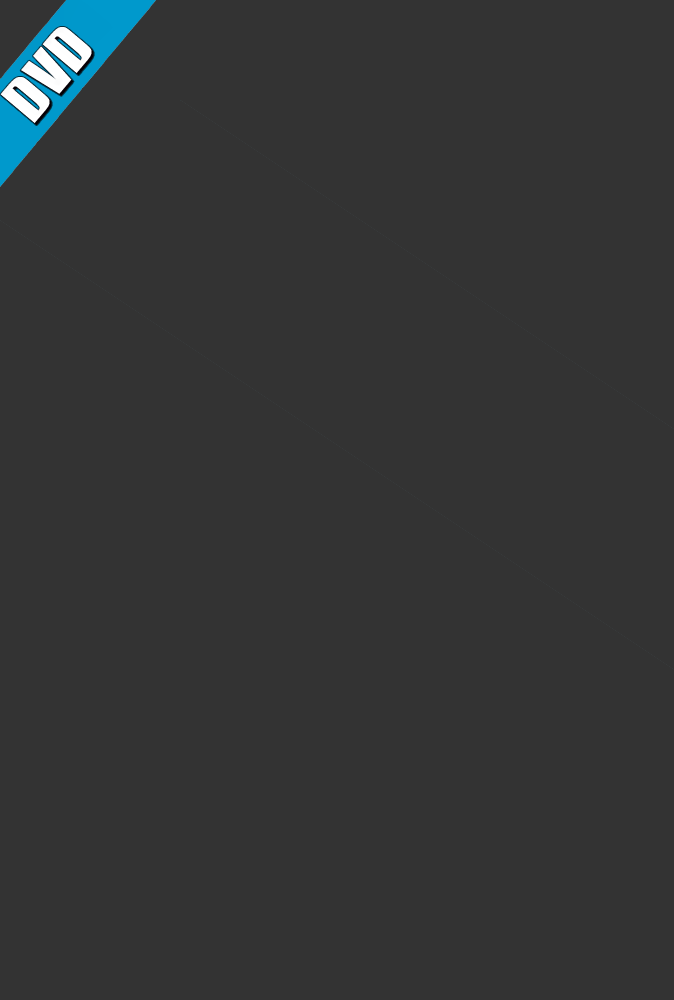
<style>
.page{position:relative;width:674px;height:1000px;background:#333333}
.page>*{position:absolute;margin:0}
.t1{font:60px "Impact";color:#ffffff}
</style>
<div class="page">
<p class="t1" style="left:0px;top:27px;width:94px;height:98px;rotate:-50deg">DVD</p>
</div>
